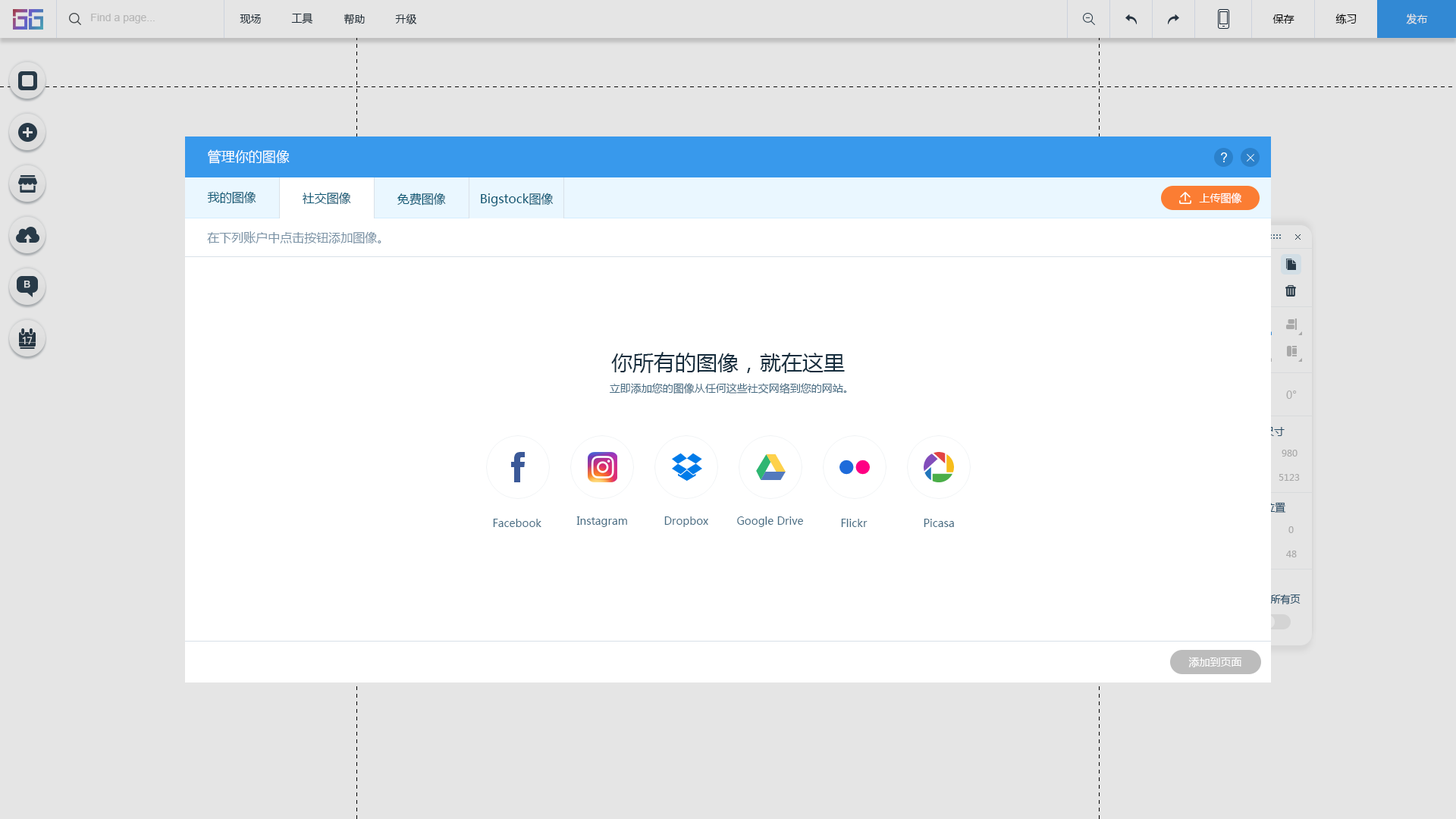
<style>
.page{position:relative;width:1456px;height:819px;background:#e5e5e5}
.page>*{position:absolute;margin:0}
.t1{font:10.6px "ArialMT";color:#cccccc}
.t2{font:10.6px "MicrosoftYaHei";color:#20303c}
.t3{font:10.6px "MicrosoftYaHei";color:#000000}
.t4{font:10.6px "MicrosoftYaHei";color:#e5e5e5}
.t5{font:13.6px "MicrosoftYaHei";color:#ffffff}
.t6{font:12.1px "MicrosoftYaHei";color:#075673}
.t7{font:10.6px "MicrosoftYaHei";color:#ffffff}
.t8{font:12.1px "MicrosoftYaHei";color:#7a92a5}
.t9{font:21.2px "MicrosoftYaHei";color:#162d3d}
.t10{font:10.6px "MicrosoftYaHei";color:#486d84}
.t11{font:10.6px "MicrosoftYaHei";color:#bcbcbc}
.t12{font:10.6px "MicrosoftYaHei"}
.t13{font:9.1px "MicrosoftYaHei";color:#bcbcbc}
.t14{font:9.9px "MicrosoftYaHei"}
</style>
<div class="page">
<p class="t1" style="left:91px;top:14px;width:64px;height:10px">Find a page...</p>
<p class="t2" style="left:240px;top:14px;width:21px;height:10px">现场</p>
<p class="t2" style="left:291px;top:13px;width:22px;height:11px">工具</p>
<p class="t2" style="left:344px;top:14px;width:21px;height:11px">帮助</p>
<p class="t2" style="left:395px;top:14px;width:22px;height:10px">升级</p>
<p class="t3" style="left:1272px;top:14px;width:22px;height:10px">保存</p>
<p class="t3" style="left:1335px;top:14px;width:22px;height:10px">练习</p>
<p class="t4" style="left:1406px;top:14px;width:22px;height:10px">发布</p>
<p class="t5" style="left:208px;top:149px;width:82px;height:15px">管理你的图像</p>
<p class="t6" style="left:207px;top:191px;width:49px;height:13px">我的图像</p>
<p class="t6" style="left:303px;top:192px;width:48px;height:13px">社交图像</p>
<p class="t6" style="left:397px;top:193px;width:49px;height:13px">免费图像</p>
<p class="t6" style="left:481px;top:193px;width:73px;height:13px">Bigstock图像</p>
<p class="t7" style="left:1199px;top:193px;width:43px;height:11px">上传图像</p>
<p class="t8" style="left:207px;top:231px;width:174px;height:13px">在下列账户中点击按钮添加图像。</p>
<p class="t9" style="left:611px;top:352px;width:234px;height:21px">你所有的图像，就在这里</p>
<p class="t10" style="left:610px;top:383px;width:237px;height:11px">立即添加您的图像从任何这些社交网络到您的网站。</p>
<p class="t11" style="left:1286px;top:391px;width:11px;height:8px">0°</p>
<p class="t12" style="left:1263px;top:427px;width:22px;height:9px">尺寸</p>
<p class="t13" style="left:1282px;top:450px;width:15px;height:7px">980</p>
<p class="t13" style="left:1279px;top:474px;width:21px;height:7px">5123</p>
<p class="t12" style="left:1264px;top:502px;width:22px;height:11px">位置</p>
<p class="t10" style="left:493px;top:519px;width:48px;height:8px">Facebook</p>
<p class="t10" style="left:576px;top:516px;width:51px;height:11px">Instagram</p>
<p class="t10" style="left:664px;top:516px;width:44px;height:11px">Dropbox</p>
<p class="t10" style="left:737px;top:516px;width:66px;height:11px">Google Drive</p>
<p class="t10" style="left:841px;top:519px;width:27px;height:8px">Flickr</p>
<p class="t10" style="left:924px;top:519px;width:30px;height:8px">Picasa</p>
<p class="t13" style="left:1288px;top:526px;width:6px;height:7px">0</p>
<p class="t13" style="left:1286px;top:551px;width:11px;height:6px">48</p>
<p class="t14" style="left:1250px;top:594px;width:51px;height:10px">显示所有页</p>
<p class="t7" style="left:1188px;top:657px;width:54px;height:10px">添加到页面</p>
</div>
